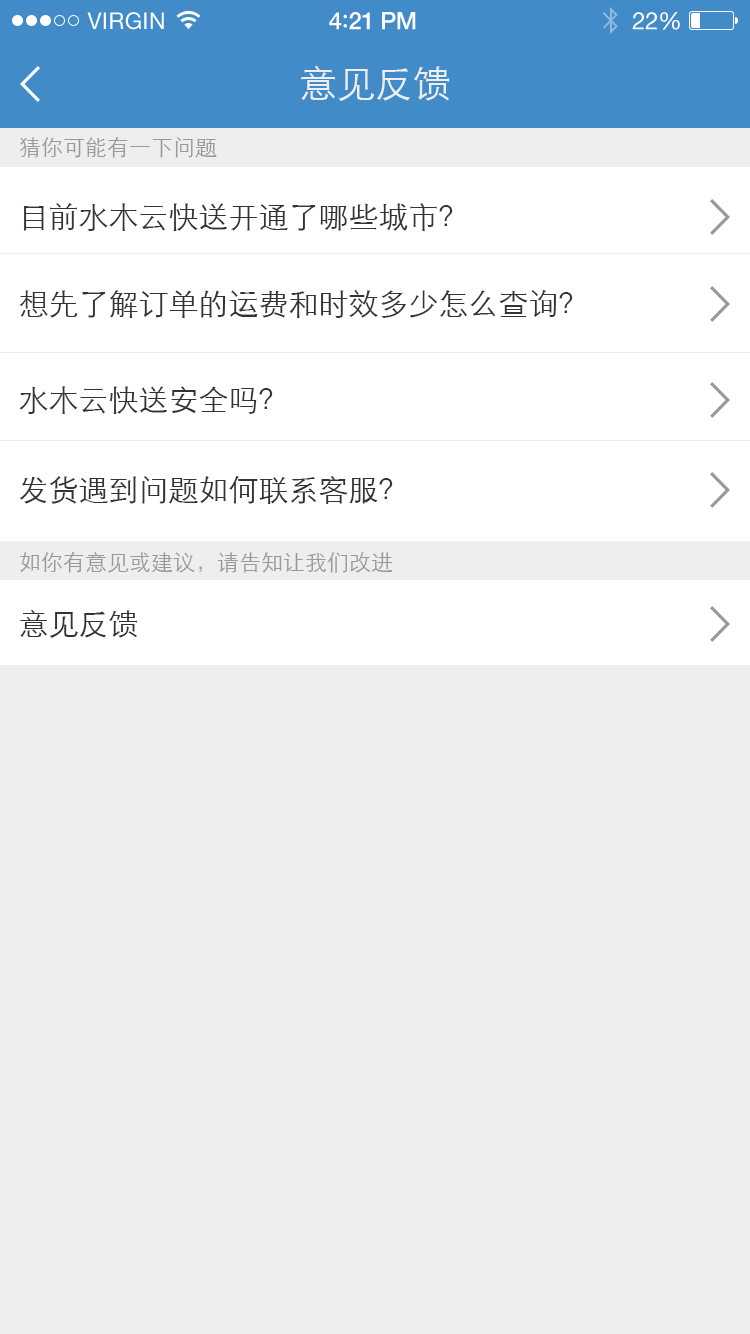
<style>
.page{position:relative;width:750px;height:1334px;background:#eeeeee}
.page>*{position:absolute;margin:0}
.t1{font:23px "HelveticaNeue";letter-spacing:0.02em;color:#ffffff}
.t2{font:24px "HelveticaNeue-Medium";letter-spacing:-0.02em;color:#ffffff}
.t3{font:26px "Avenir-Medium";letter-spacing:-0.02em;color:#ffffff}
.t4{font:24px "HelveticaNeue";letter-spacing:-0.02em;color:#ffffff}
.t5{font:38px "STXihei";color:#eeeeee}
.t6{font:22px "STXihei";color:#999999}
.t7{font:30px "STXihei";color:#333333}
</style>
<div class="page">
<p class="t1" style="left:87px;top:12px;width:77px;height:18px">VIRGIN</p>
<p class="t2" style="left:329px;top:12px;width:87px;height:18px">4<span class="t3">:</span>21 PM</p>
<p class="t4" style="left:632px;top:12px;width:48px;height:18px">22%</p>
<p class="t5" style="left:301px;top:65px;width:149px;height:36px">意见反馈</p>
<p class="t6" style="left:20px;top:137px;width:197px;height:21px">猜你可能有一下问题</p>
<p class="t7" style="left:23px;top:203px;width:430px;height:28px">目前水木云快送开通了哪些城市？</p>
<p class="t7" style="left:19px;top:290px;width:554px;height:28px">想先了解订单的运费和时效多少怎么查询？</p>
<p class="t7" style="left:19px;top:386px;width:254px;height:28px">水木云快送安全吗？</p>
<p class="t7" style="left:19px;top:476px;width:374px;height:28px">发货遇到问题如何联系客服？</p>
<p class="t6" style="left:20px;top:552px;width:373px;height:21px">如你有意见或建议，请告知让我们改进</p>
<p class="t7" style="left:20px;top:610px;width:118px;height:28px">意见反馈</p>
</div>
